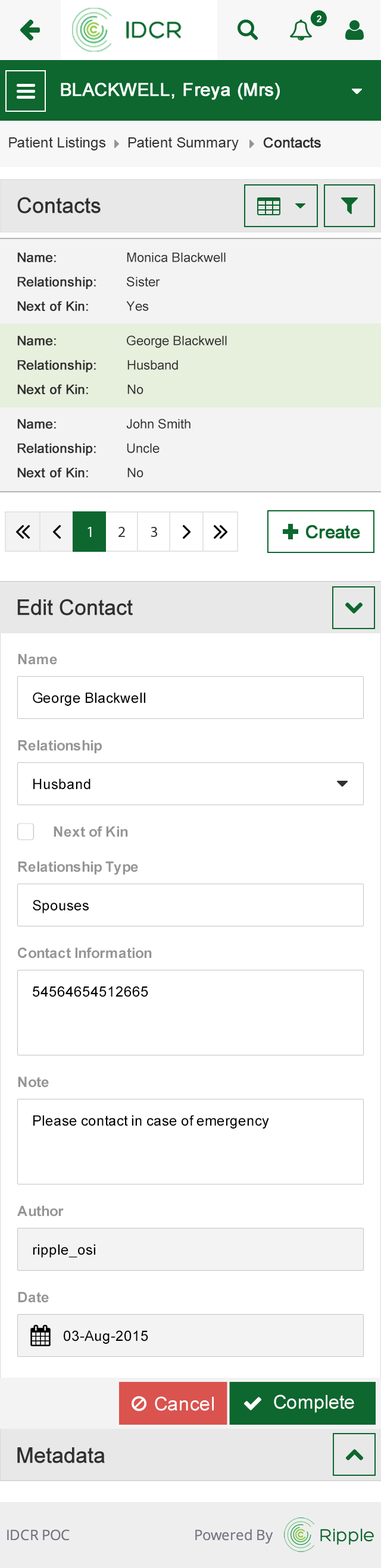
<style>
.page{position:relative;width:381px;height:1568px;background:#ffffff}
.page>*{position:absolute;margin:0}
.t1{font:14.3px "ArialMT";color:#313131}
.t2{font:14.3px "ArialMT";color:#313131;font-weight:bold}
.t3{font:21.4px "ArialMT";color:#303030;font-weight:bold}
.t4{font:13.1px "ArialMT";color:#303030;font-weight:bold}
.t5{font:13.1px "ArialMT";color:#303030}
.t6{font:14.3px "Arial-BoldMT";color:#959595}
.t7{font:14.3px "ArialMT";color:#000000}
.t8{font:19px "ArialMT";color:#ffffff}
</style>
<div class="page">
<p class="t1" style="left:9px;top:137px;width:97px;height:13px">Patient Listings</p>
<p class="t1" style="left:128px;top:137px;width:110px;height:13px">Patient Summary</p>
<p class="t2" style="left:263px;top:137px;width:57px;height:11px">Contacts</p>
<p class="t3" style="left:17px;top:197px;width:83px;height:16px">Contacts</p>
<p class="t4" style="left:17px;top:252px;width:39px;height:10px">Name:</p>
<p class="t5" style="left:127px;top:252px;width:98px;height:10px">Monica Blackwell</p>
<p class="t4" style="left:17px;top:276px;width:79px;height:13px">Relationship:</p>
<p class="t5" style="left:127px;top:276px;width:33px;height:11px">Sister</p>
<p class="t4" style="left:17px;top:301px;width:71px;height:10px">Next of Kin:</p>
<p class="t5" style="left:126px;top:301px;width:23px;height:10px">Yes</p>
<p class="t4" style="left:17px;top:335px;width:39px;height:10px">Name:</p>
<p class="t5" style="left:127px;top:335px;width:100px;height:13px">George Blackwell</p>
<p class="t4" style="left:17px;top:360px;width:79px;height:12px">Relationship:</p>
<p class="t5" style="left:127px;top:360px;width:51px;height:10px">Husband</p>
<p class="t4" style="left:17px;top:384px;width:71px;height:10px">Next of Kin:</p>
<p class="t5" style="left:127px;top:384px;width:16px;height:10px">No</p>
<p class="t4" style="left:17px;top:419px;width:39px;height:10px">Name:</p>
<p class="t5" style="left:126px;top:419px;width:64px;height:10px">John Smith</p>
<p class="t4" style="left:17px;top:443px;width:79px;height:12px">Relationship:</p>
<p class="t5" style="left:127px;top:443px;width:32px;height:10px">Uncle</p>
<p class="t4" style="left:17px;top:467px;width:71px;height:10px">Next of Kin:</p>
<p class="t5" style="left:127px;top:467px;width:16px;height:10px">No</p>
<p class="t3" style="left:17px;top:599px;width:116px;height:16px">Edit Contact</p>
<p class="t6" style="left:18px;top:653px;width:39px;height:12px">Name</p>
<p class="t7" style="left:33px;top:692px;width:112px;height:14px">George Blackwell</p>
<p class="t6" style="left:18px;top:740px;width:84px;height:13px">Relationship</p>
<p class="t7" style="left:33px;top:778px;width:57px;height:12px">Husband</p>
<p class="t6" style="left:54px;top:826px;width:74px;height:11px">Next of Kin</p>
<p class="t6" style="left:18px;top:861px;width:120px;height:14px">Relationship Type</p>
<p class="t7" style="left:33px;top:900px;width:56px;height:13px">Spouses</p>
<p class="t6" style="left:18px;top:947px;width:134px;height:12px">Contact Information</p>
<p class="t7" style="left:33px;top:986px;width:115px;height:11px">54564654512665</p>
<p class="t6" style="left:18px;top:1076px;width:31px;height:12px">Note</p>
<p class="t7" style="left:33px;top:1115px;width:236px;height:14px">Please contact in case of emergency</p>
<p class="t6" style="left:17px;top:1205px;width:47px;height:12px">Author</p>
<p class="t7" style="left:33px;top:1244px;width:62px;height:14px">ripple_osi</p>
<p class="t6" style="left:18px;top:1292px;width:31px;height:11px">Date</p>
<p class="t7" style="left:64px;top:1330px;width:84px;height:14px">03-Aug-2015</p>
<p class="t8" style="left:155px;top:1396px;width:58px;height:15px">Cancel</p>
<p class="t8" style="left:274px;top:1394px;width:80px;height:19px">Complete</p>
<p class="t3" style="left:17px;top:1447px;width:88px;height:16px">Metadata</p>
</div>
